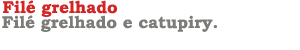
<style>
.page{position:relative;width:300px;height:50px;background:#ffffff}
.page>*{position:absolute;margin:0}
.t1{font:17px "BookmanOldStyle-Bold";color:#d42525}
.t2{font:17px "BookmanOldStyle-Bold";color:#7c7c79}
</style>
<div class="page">
<p class="t1" style="left:3px;top:0px;width:115px;height:17px">Filé grelhado</p>
<p class="t2" style="left:2px;top:15px;width:215px;height:17px">Filé grelhado e catupiry.</p>
</div>
